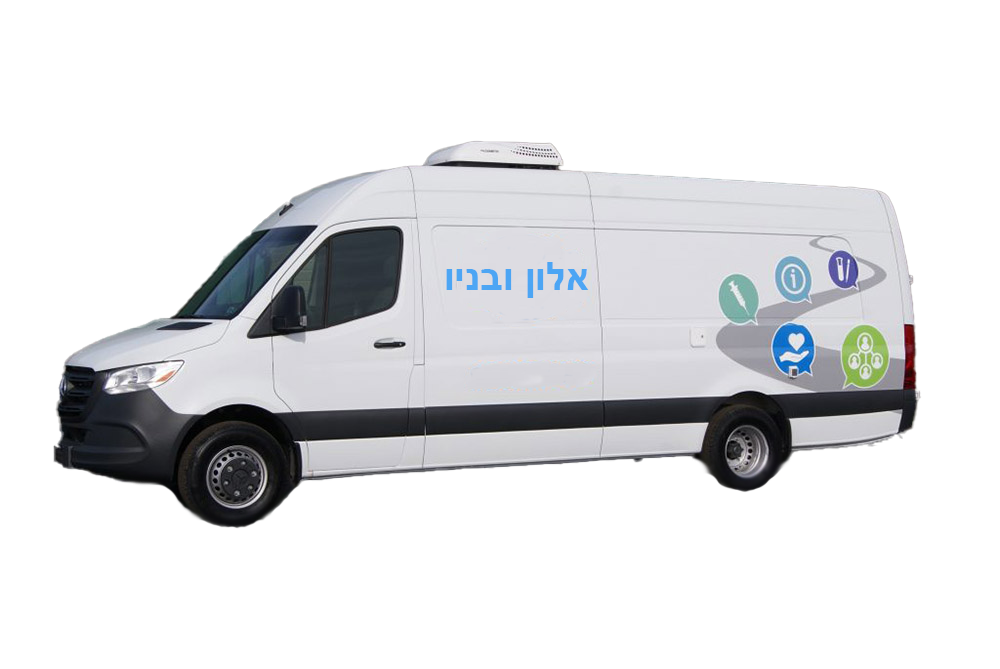
<style>
.page{position:relative;width:1000px;height:669px;background:#ffffff}
.page>*{position:absolute;margin:0}
.t1{font:39.4px "Arial-BoldMT";color:#4ca5f4}
</style>
<div class="page">
<p class="t1" style="left:446px;top:262px;width:143px;height:36px">אלון ובניו</p>
</div>
